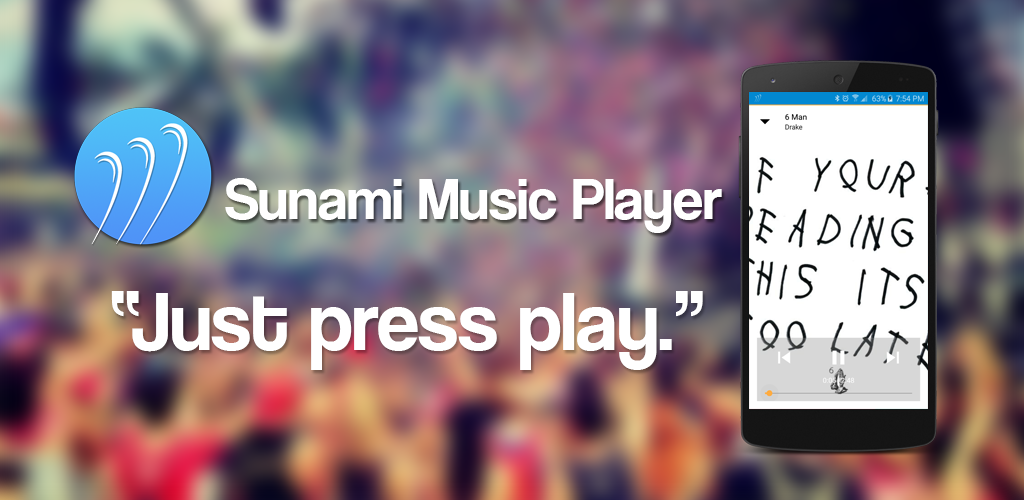
<style>
.page{position:relative;width:1024px;height:500px}
.page>*{position:absolute;margin:0}
.t1{font:60px "CoolveticaRg-Regular";color:#ffffff}
.t2{font:84px "CoolveticaRg-Regular";color:#ffffff}
</style>
<div class="page">
<p class="t1" style="left:225px;top:178px;width:497px;height:55px">Sunami Music Player</p>
<p class="t2" style="left:111px;top:291px;width:592px;height:79px">“Just press play.”</p>
</div>
